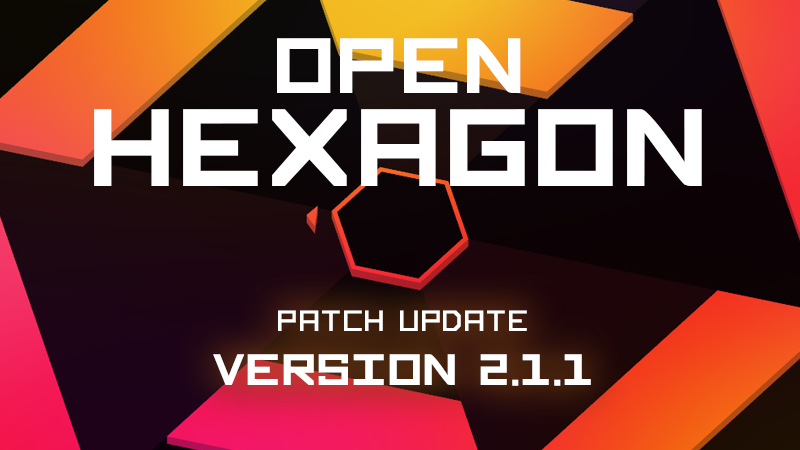
<style>
.page{position:relative;width:800px;height:450px}
.page>*{position:absolute;margin:0}
.t1{font:120.2px/93.9px "OpenSquare-Bold";color:#ffffff}
.t2{font:85.8px/66px "OpenSquare-Bold";color:#ffffff}
.t3{font:48px/54.5px "OpenSquare-Bold";color:#ffffff;text-transform:uppercase}
.t4{font:32px/54.5px "OpenSquare-Regular";color:#ffffff;text-transform:uppercase}
</style>
<div class="page">
<p class="t1" style="left:94px;top:38px;width:608px;height:148px;text-align:center"><span class="t2">OPEN<br></span>HEXAGON</p>
<p class="t3" style="left:213px;top:310px;width:378px;height:76px;text-align:center"><span class="t4">Patch UPDATE<br></span>VERSION 2.1.1</p>
</div>
